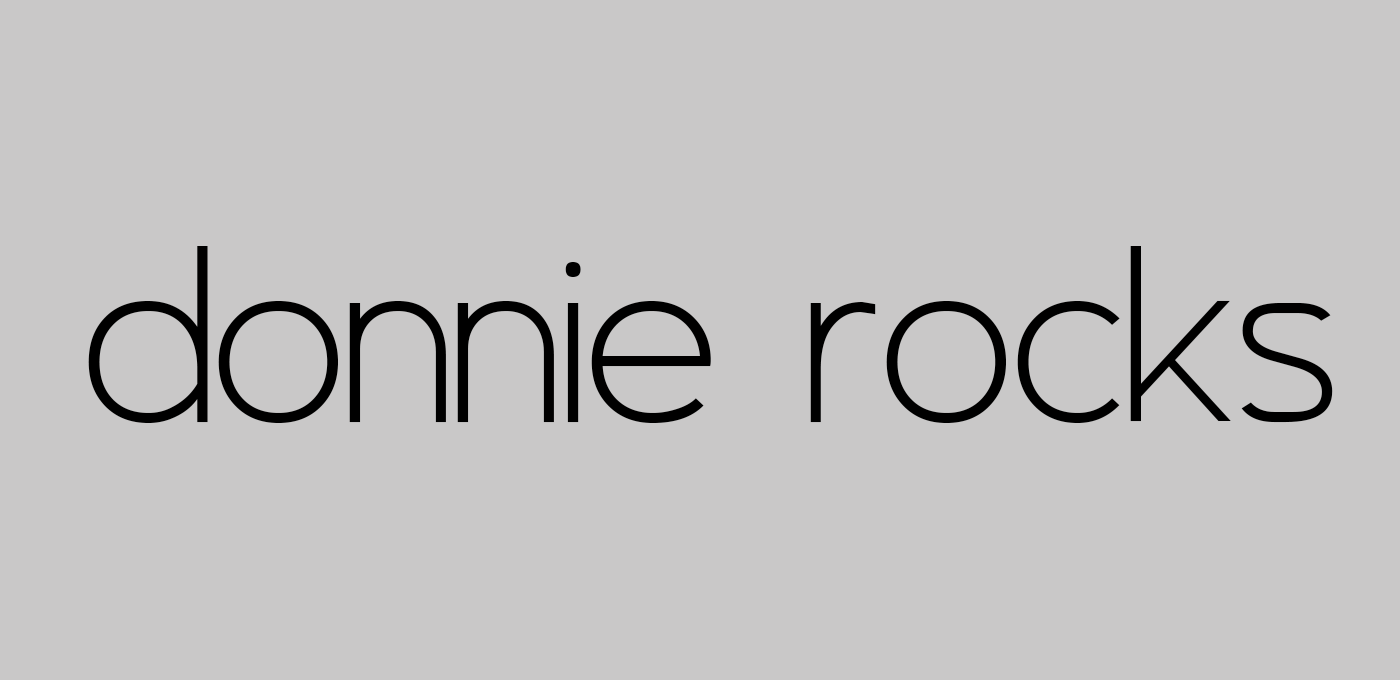
<style>
.page{position:relative;width:1400px;height:680px;background:#c9c8c8}
.page>*{position:absolute;margin:0}
.t1{font:300px "Asenine";color:#000000}
</style>
<div class="page">
<p class="t1" style="left:88px;top:246px;width:1245px;height:177px">donnie rocks</p>
</div>
